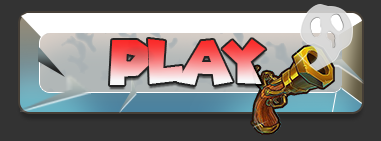
<style>
.page{position:relative;width:381px;height:141px;background:#333333}
.page>*{position:absolute;margin:0}
.t1{font:61px "SuperMarioGalaxy";letter-spacing:-0.02em;text-transform:uppercase}
</style>
<div class="page">
<p class="t1" style="left:110px;top:39px;width:156px;height:46px">PLAY</p>
</div>
